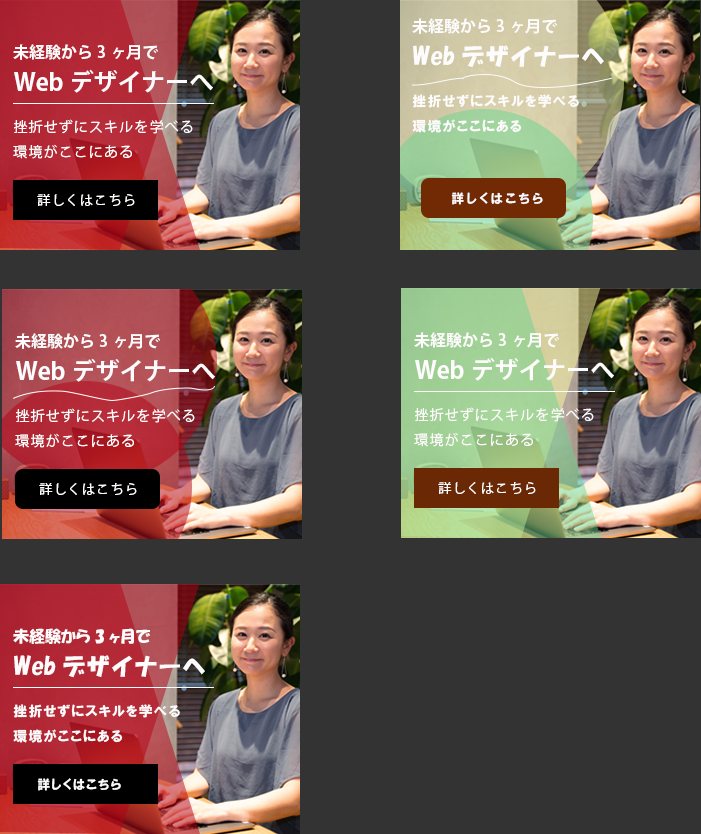
<style>
.page{position:relative;width:701px;height:834px;background:#333333}
.page>*{position:absolute;margin:0}
.t1{font:16px "KozGoPr6N-Bold";color:#fdfbfb}
.t2{font:24px "HGSSoeiKakupoptai";color:#fdfbfb}
.t3{font:24px "KozGoPr6N-Bold";color:#fdfbfb}
.t4{font:14px "HGPSoeiKakugothicUB";letter-spacing:0.08em;color:#fdfbfb}
.t5{font:14px "KozGoPr6N-Regular";letter-spacing:0.08em;color:#fdfbfb}
.t6{font:13px "KozGoPr6N-Regular";letter-spacing:0.1em;color:#fdfbfb}
.t7{font:13px "HGPSoeiKakugothicUB";letter-spacing:0.2em;color:#fdfbfb}
.t8{font:16px "HGPSoeiKakupoptai";color:#fdfbfb}
.t9{font:13px "HGPSoeiKakugothicUB";letter-spacing:0.1em;color:#fdfbfb}
</style>
<div class="page">
<p class="t1" style="left:412px;top:18px;width:145px;height:16px">未経験から3ヶ月で</p>
<p class="t1" style="left:13px;top:44px;width:145px;height:16px">未経験から3ヶ月で</p>
<p class="t2" style="left:413px;top:45px;width:191px;height:23px">Webデザイナーへ</p>
<p class="t3" style="left:14px;top:69px;width:199px;height:24px">Webデザイナーへ</p>
<p class="t4" style="left:412px;top:94px;width:167px;height:39px">挫折せずにスキルを学べる<br>環境がここにある</p>
<p class="t5" style="left:13px;top:119px;width:180px;height:40px">挫折せずにスキルを学べる<br>環境がここにある</p>
<p class="t6" style="left:37px;top:194px;width:98px;height:12px">詳しくはこちら</p>
<p class="t7" style="left:451px;top:192px;width:92px;height:13px">詳しくはこちら</p>
<p class="t1" style="left:15px;top:333px;width:145px;height:16px">未経験から3ヶ月で</p>
<p class="t1" style="left:414px;top:332px;width:145px;height:16px">未経験から3ヶ月で</p>
<p class="t3" style="left:16px;top:358px;width:199px;height:24px">Webデザイナーへ</p>
<p class="t3" style="left:415px;top:357px;width:199px;height:24px">Webデザイナーへ</p>
<p class="t5" style="left:15px;top:408px;width:180px;height:40px">挫折せずにスキルを学べる<br>環境がここにある</p>
<p class="t5" style="left:414px;top:407px;width:180px;height:40px">挫折せずにスキルを学べる<br>環境がここにある</p>
<p class="t6" style="left:39px;top:483px;width:98px;height:12px">詳しくはこちら</p>
<p class="t6" style="left:438px;top:482px;width:98px;height:12px">詳しくはこちら</p>
<p class="t8" style="left:13px;top:628px;width:137px;height:16px">未経験から3ヶ月で</p>
<p class="t2" style="left:14px;top:655px;width:191px;height:23px">Webデザイナーへ</p>
<p class="t4" style="left:13px;top:704px;width:167px;height:39px">挫折せずにスキルを学べる<br>環境がここにある</p>
<p class="t9" style="left:37px;top:778px;width:84px;height:13px">詳しくはこちら</p>
</div>
